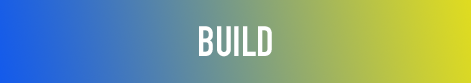
<style>
.page{position:relative;width:471px;height:83px}
.page>*{position:absolute;margin:0}
.t1{font:41.7px "DINCondensed-Bold";color:#ffffff}
</style>
<div class="page">
<p class="t1" style="left:199px;top:26px;width:73px;height:31px">BUILD</p>
</div>
